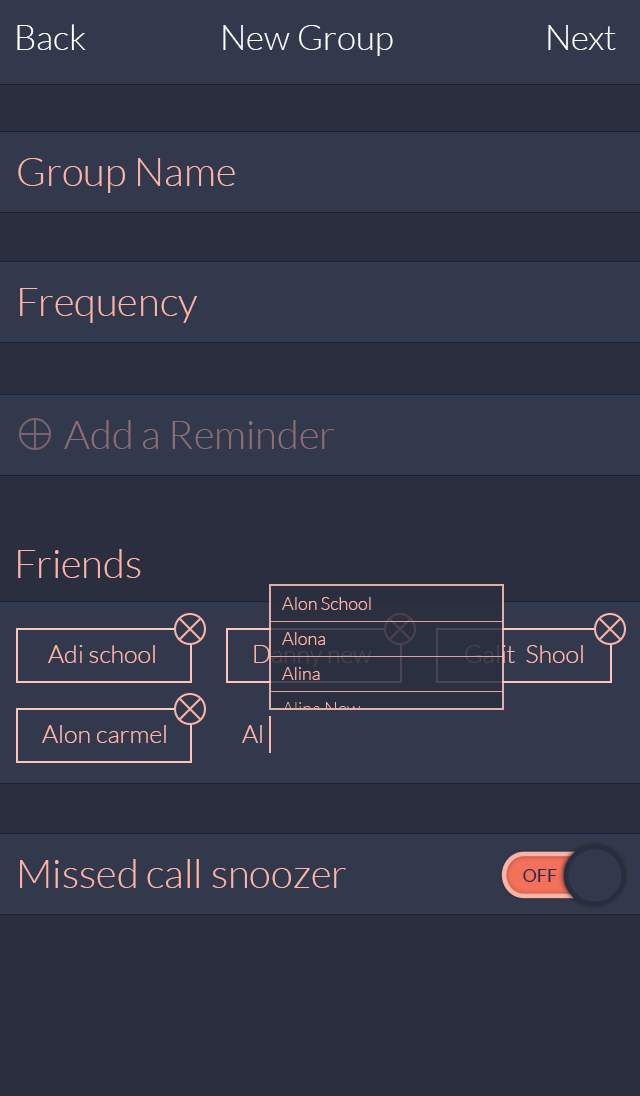
<style>
.page{position:relative;width:640px;height:1096px;background:#33394c}
.page>*{position:absolute;margin:0}
.t1{font:35px "Lato-Light";color:#ffffff}
.t2{font:40px "Lato-Light";color:#feb5a8}
.t3{font:40px "Lato-Light";color:#8f6e71}
.t4{font:18px "Lato-Light";color:#feb5a8}
.t5{font:25px "Lato-Light";color:#feb5a8}
.t6{font:25px "Lato-Light"}
.t7{font:18px "Lato-Light"}
.t8{font:18px "Lato-Regular";color:#252f4e}
</style>
<div class="page">
<p class="t1" style="left:17px;top:24px;width:69px;height:26px">Back</p>
<p class="t1" style="left:223px;top:25px;width:170px;height:31px">New Group</p>
<p class="t1" style="left:548px;top:25px;width:68px;height:25px">Next</p>
<p class="t2" style="left:18px;top:158px;width:217px;height:35px">Group Name</p>
<p class="t2" style="left:20px;top:288px;width:177px;height:35px">Frequency</p>
<p class="t3" style="left:64px;top:420px;width:270px;height:29px">Add a Reminder</p>
<p class="t2" style="left:18px;top:549px;width:123px;height:29px">Friends</p>
<p class="t4" style="left:282px;top:597px;width:89px;height:13px">Alon School</p>
<p class="t4" style="left:282px;top:632px;width:43px;height:13px">Alona</p>
<p class="t5" style="left:48px;top:645px;width:107px;height:18px">Adi school</p>
<p class="t6" style="left:254px;top:645px;width:118px;height:22px">Danny new</p>
<p class="t6" style="left:465px;top:645px;width:118px;height:18px">Galit  Shool</p>
<p class="t4" style="left:282px;top:667px;width:38px;height:13px">Alina</p>
<p class="t7" style="left:282px;top:702px;width:79px;height:13px">Alina New</p>
<p class="t5" style="left:42px;top:725px;width:124px;height:18px">Alon carmel</p>
<p class="t5" style="left:242px;top:725px;width:20px;height:18px">Al</p>
<p class="t2" style="left:20px;top:859px;width:326px;height:29px">Missed call snoozer</p>
<p class="t8" style="left:523px;top:869px;width:34px;height:13px">OFF</p>
</div>
